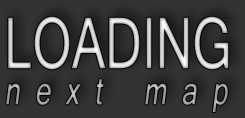
<style>
.page{position:relative;width:245px;height:118px;background:#333333}
.page>*{position:absolute;margin:0}
.t1{font:42px "Shruti";letter-spacing:0.5em;font-style:italic;scale:0.71 1}
.t2{font:76.6px/13.4px "Shruti";text-transform:uppercase;scale:0.71 1}
</style>
<div class="page">
<p class="t1" style="left:6px;top:16px;width:223px;height:96px"><span class="t2">Loading<br></span>next map</p>
</div>
